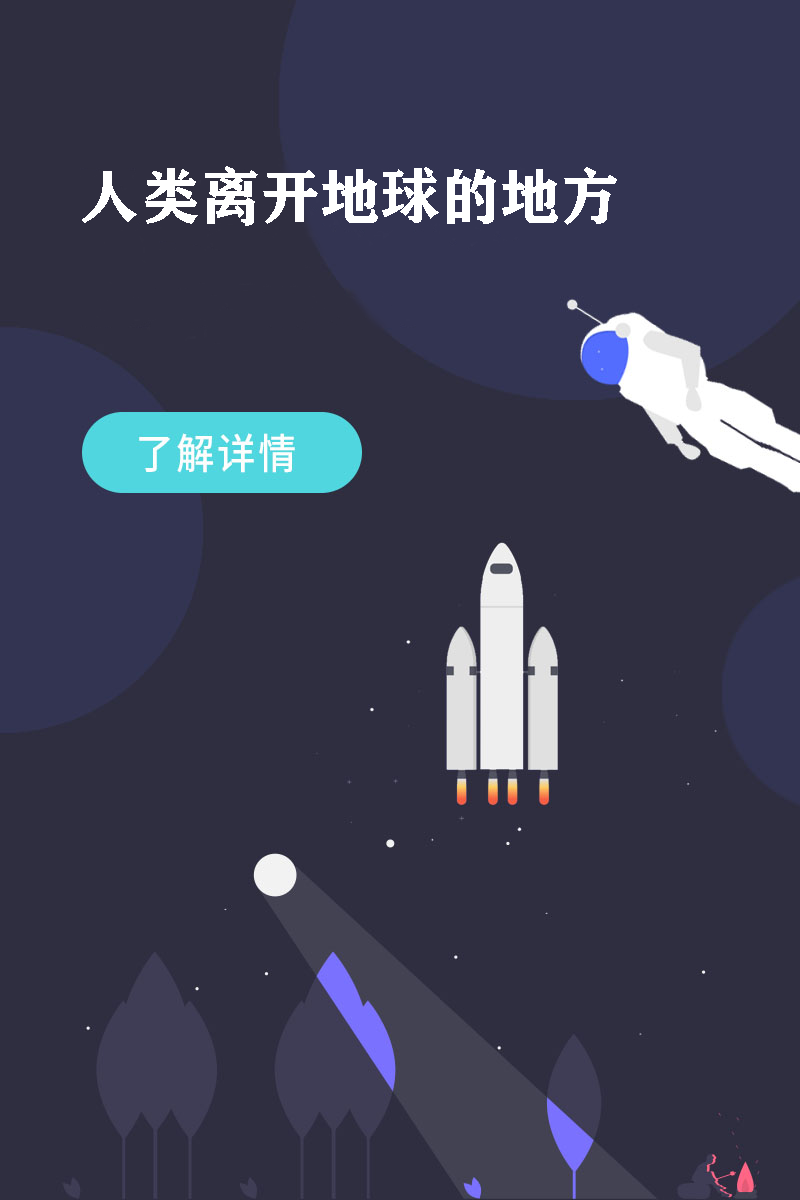
<style>
.page{position:relative;width:800px;height:1200px;background:#2f2e40}
.page>*{position:absolute;margin:0}
.t1{font:60px "FZCHSJW--GB1-0";color:#ffffff}
</style>
<div class="page">
<p class="t1" style="left:82px;top:166px;width:535px;height:60px">人类离开地球的地方</p>
</div>
